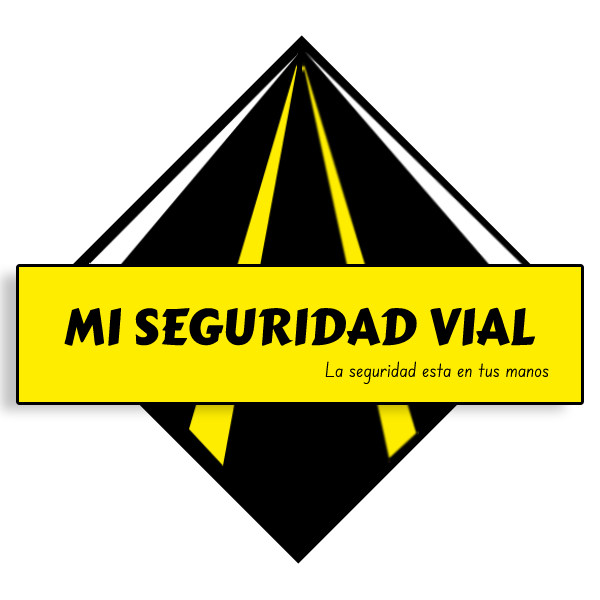
<style>
.page{position:relative;width:600px;height:600px;background:#ffffff}
.page>*{position:absolute;margin:0}
.t1{font:50px "CarterOne";color:#000000}
.t2{font:20px "EduSABeginner-Regular";color:#000000}
</style>
<div class="page">
<p class="t1" style="left:64px;top:307px;width:472px;height:39px">MI SEGURIDAD VIAL</p>
<p class="t2" style="left:325px;top:361px;width:224px;height:24px">La seguridad esta en tus manos</p>
</div>
